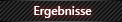
<style>
.page{position:relative;width:122px;height:22px}
.page>*{position:absolute;margin:0}
.t1{font:12px "SegoeUI-Semibold";color:#ffffff}
</style>
<div class="page">
<p class="t1" style="left:34px;top:6px;width:58px;height:12px">Ergebnisse</p>
</div>
